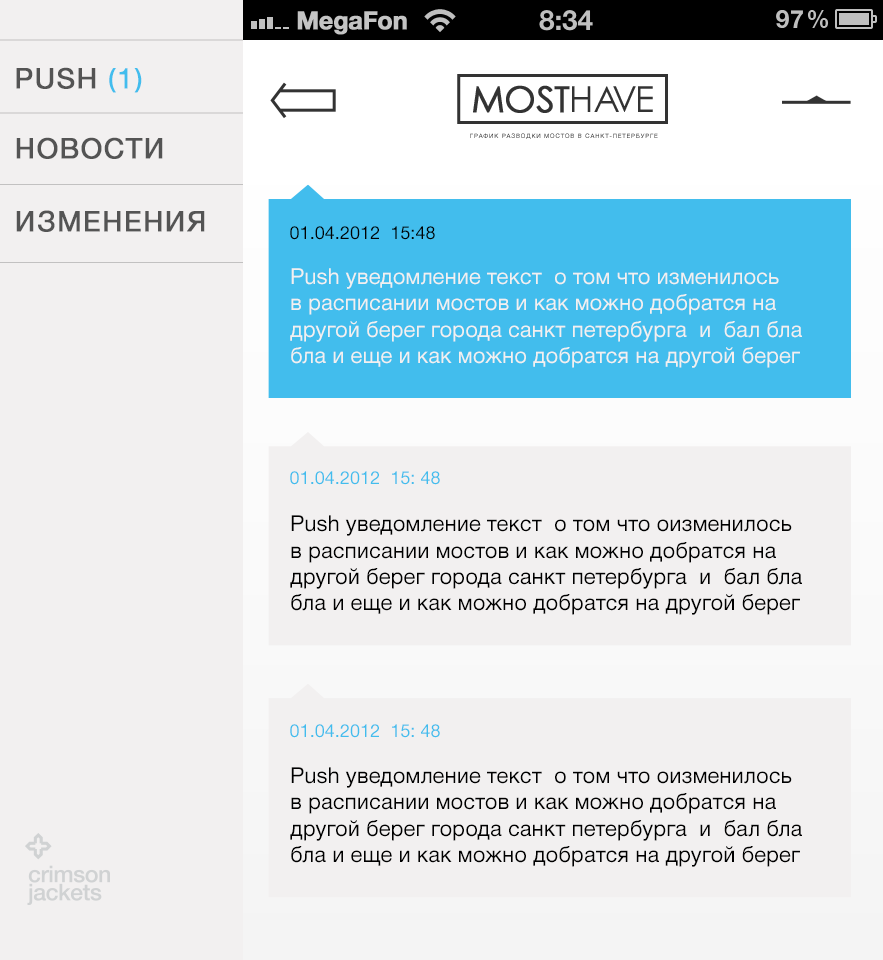
<style>
.page{position:relative;width:883px;height:960px;background:#f2f0f0}
.page>*{position:absolute;margin:0}
.t1{font:27.9px "HelveticaNeue";letter-spacing:0.04em;color:#545454;text-transform:uppercase;font-weight:bold}
.t2{font:26px "HelveticaNeue";letter-spacing:0.04em;color:#42bded;text-transform:uppercase;font-weight:bold}
.t3{font:27.9px "HelveticaNeue";letter-spacing:0.04em;color:#42bded;text-transform:uppercase;font-weight:bold}
.t4{font:18.1px "HelveticaNeueCyr-Roman";color:#020202}
.t5{font:22px "HelveticaNeueCyr-Roman";color:#f2f0f0}
.t6{font:18.1px "HelveticaNeueCyr-Roman";color:#42bded}
.t7{font:22px "HelveticaNeueCyr-Roman";color:#000000}
</style>
<div class="page">
<p class="t1" style="left:16px;top:67px;width:126px;height:26px">Push <span class="t2">(</span><span class="t3">1</span><span class="t2">)</span></p>
<p class="t1" style="left:16px;top:137px;width:147px;height:22px">новости</p>
<p class="t1" style="left:16px;top:210px;width:189px;height:22px">изменения</p>
<p class="t4" style="left:290px;top:226px;width:145px;height:14px">01.04.2012  15:48</p>
<p class="t5" style="left:290px;top:268px;width:512px;height:100px">Push уведомление текст  о том что изменилось <br>в расписании мостов и как можно добратся на другой берег города санкт петербурга  и  бал бла бла и еще и как можно добратся на другой берег</p>
<p class="t6" style="left:290px;top:471px;width:150px;height:14px">01.04.2012  15: 48</p>
<p class="t7" style="left:290px;top:515px;width:512px;height:100px">Push уведомление текст  о том что оизменилось <br>в расписании мостов и как можно добратся на другой берег города санкт петербурга  и  бал бла бла и еще и как можно добратся на другой берег</p>
<p class="t6" style="left:290px;top:724px;width:150px;height:14px">01.04.2012  15: 48</p>
<p class="t7" style="left:290px;top:767px;width:512px;height:100px">Push уведомление текст  о том что оизменилось <br>в расписании мостов и как можно добратся на другой берег города санкт петербурга  и  бал бла бла и еще и как можно добратся на другой берег</p>
</div>
